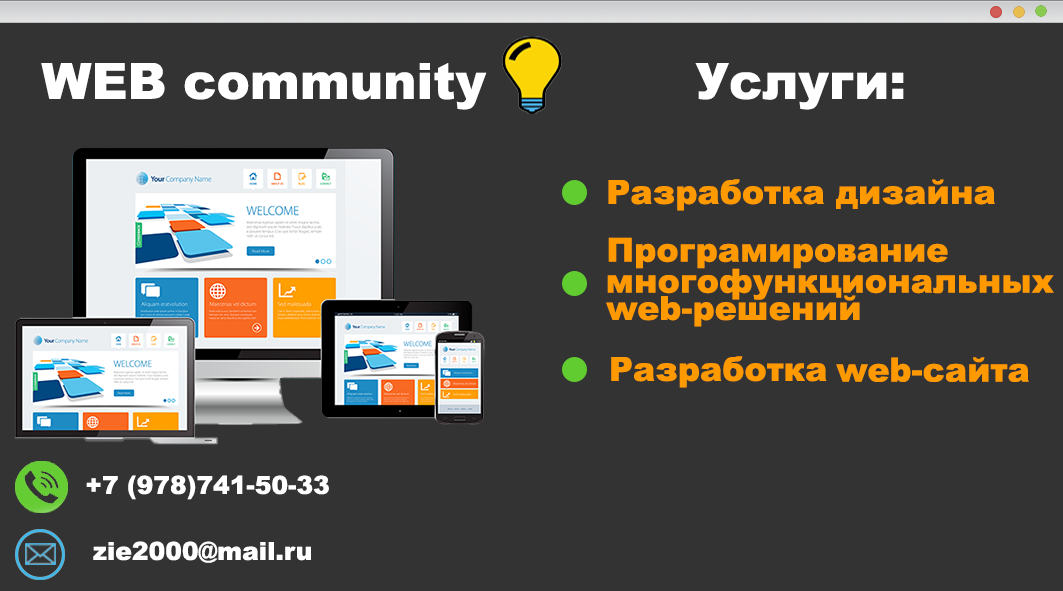
<style>
.page{position:relative;width:1063px;height:591px;background:#333333}
.page>*{position:absolute;margin:0}
.t1{font:50px "Arial-Black";color:#ffffff}
.t2{font:33.3px "Arial-Black";color:#ff9900}
.t3{font:25px "Arial-Black";color:#ffffff}
</style>
<div class="page">
<p class="t1" style="left:41px;top:63px;width:446px;height:47px">WEB community</p>
<p class="t1" style="left:695px;top:63px;width:209px;height:47px">Услуги:</p>
<p class="t2" style="left:608px;top:179px;width:387px;height:32px">Разработка дизайна</p>
<p class="t2" style="left:608px;top:237px;width:340px;height:32px">Програмирование</p>
<p class="t2" style="left:607px;top:268px;width:447px;height:32px">многофункциональных</p>
<p class="t2" style="left:606px;top:295px;width:254px;height:32px">web-решений</p>
<p class="t2" style="left:611px;top:356px;width:216px;height:32px">Разработка</p>
<p class="t2" style="left:836px;top:357px;width:193px;height:25px">web-сайта</p>
<p class="t3" style="left:86px;top:475px;width:243px;height:25px">+7 (978)741-50-33</p>
<p class="t3" style="left:93px;top:541px;width:218px;height:22px">zie2000@mail.ru</p>
</div>
